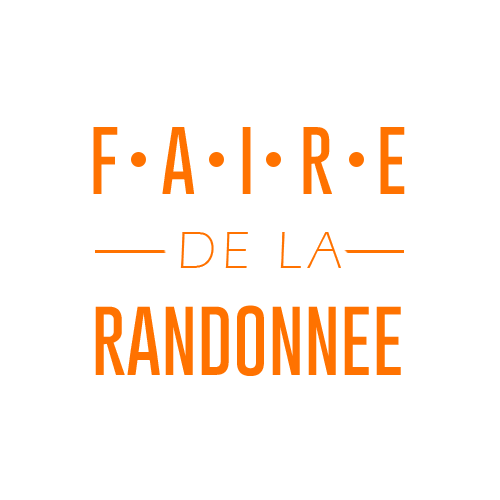
<style>
.page{position:relative;width:500px;height:500px;background:#ffffff}
.page>*{position:absolute;margin:0}
.t1{font:72px "GoboldThin";letter-spacing:0.6em;color:#ff7200}
.t2{font:54px "ErasITC-Light";letter-spacing:0.12em;color:#ff7200}
.t3{font:73.4px "GoboldThin";color:#ff7200}
</style>
<div class="page">
<p class="t1" style="left:93px;top:127px;width:312px;height:67px">FAIRE</p>
<p class="t2" style="left:180px;top:232px;width:161px;height:36px">DE LA</p>
<p class="t3" style="left:95px;top:305px;width:306px;height:71px">RANDONNEE</p>
</div>
